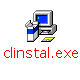
<style>
.page{position:relative;width:80px;height:80px;background:#ffffff}
.page>*{position:absolute;margin:0}
.t1{font:14px "MSReferenceSansSerif";color:#ff0000}
</style>
<div class="page">
<p class="t1" style="left:4px;top:47px;width:74px;height:11px">clinstal.exe</p>
</div>
